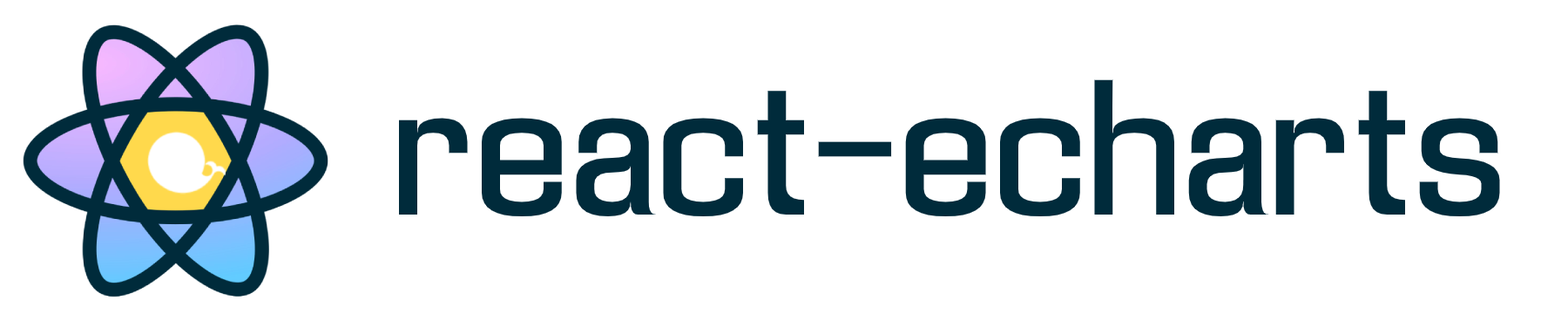
<style>
.page{position:relative;width:1568px;height:314px;background:#ffffff}
.page>*{position:absolute;margin:0}
.t1{font:174.2px "Enigmatic";color:#002b3b}
</style>
<div class="page">
<p class="t1" style="left:399px;top:79px;width:1101px;height:138px">react-echarts</p>
</div>
